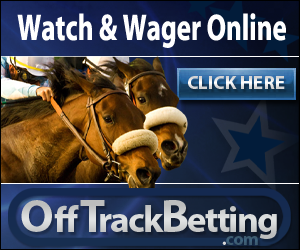
<style>
.page{position:relative;width:300px;height:250px}
.page>*{position:absolute;margin:0}
.t1{font:37.3px "Myriad-Bold";color:#ffffff;scale:0.72 1}
.t2{font:19px "MyriadPro-Bold";color:#dbdbdb}
.t3{font:37.2px "MyriadPro-Bold";letter-spacing:-0.05em;color:#e0e2e2}
.t4{font:46.5px "MyriadPro-Bold";color:#e0e2e2}
.t5{font:37.2px "MyriadPro-Bold";letter-spacing:0.05em;color:#e0e2e2}
.t6{font:46.5px "MyriadPro-Bold";letter-spacing:-0.15em;color:#e0e2e2}
.t7{font:46.5px "MyriadPro-Bold";letter-spacing:-0.05em;color:#e0e2e2}
.t8{font:18.3px "MyriadPro-Bold";letter-spacing:-0.05em;color:#3e647e}
.t9{font:18.3px "MyriadPro-Bold";letter-spacing:-0.05em;color:#ffffff}
</style>
<div class="page">
<p class="t1" style="left:17px;top:13px;width:269px;height:35px">Watch &amp; Wager Online</p>
<p class="t2" style="left:188px;top:76px;width:97px;height:13px">CLICK HERE</p>
<p class="t3" style="left:21px;top:200px;width:256px;height:39px"><span class="t4">O</span><span class="t5">ff</span><span class="t6">T</span>rack<span class="t7">B</span>etting</p>
<p class="t8" style="left:222px;top:236px;width:36px;height:9px"><span class="t9">.</span>com</p>
</div>
